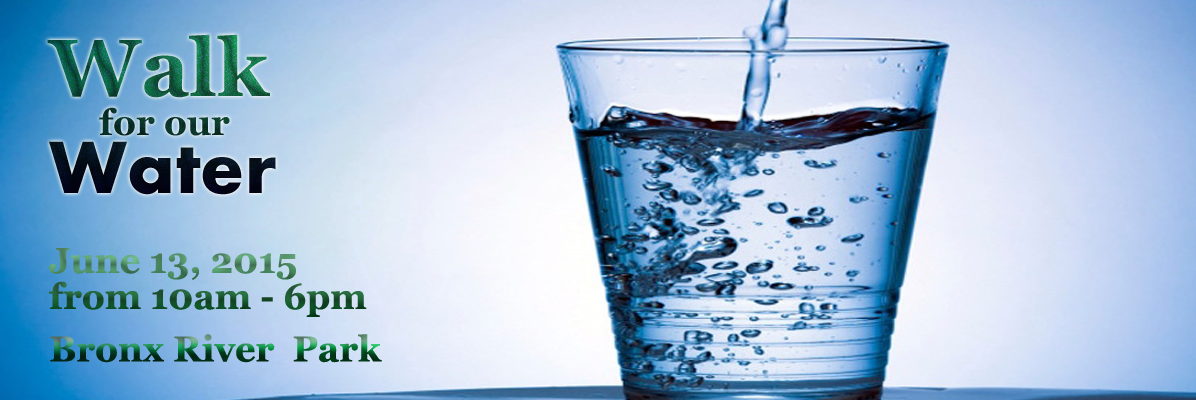
<style>
.page{position:relative;width:1196px;height:400px}
.page>*{position:absolute;margin:0}
.t1{font:36px/39px "Georgia-Bold"}
.t2{font:81px/23px "Georgia-Bold"}
.t3{font:77px/58px "Aharoni-Bold"}
.t4{font:36px/36px "Georgia-Bold"}
.t5{font:36px/23px "Georgia-Bold"}
.t6{font:36px "Georgia-Bold"}
</style>
<div class="page">
<p class="t1" style="left:47px;top:34px;width:229px;height:161px"><span class="t2">Walk <br></span>for our <br><span class="t3">Water</span></p>
<p class="t4" style="left:49px;top:248px;width:318px;height:69px"><span class="t5">June 13, 2015<br></span>from 10am - 6pm</p>
<p class="t6" style="left:50px;top:334px;width:332px;height:29px">Bronx River  Park</p>
</div>
